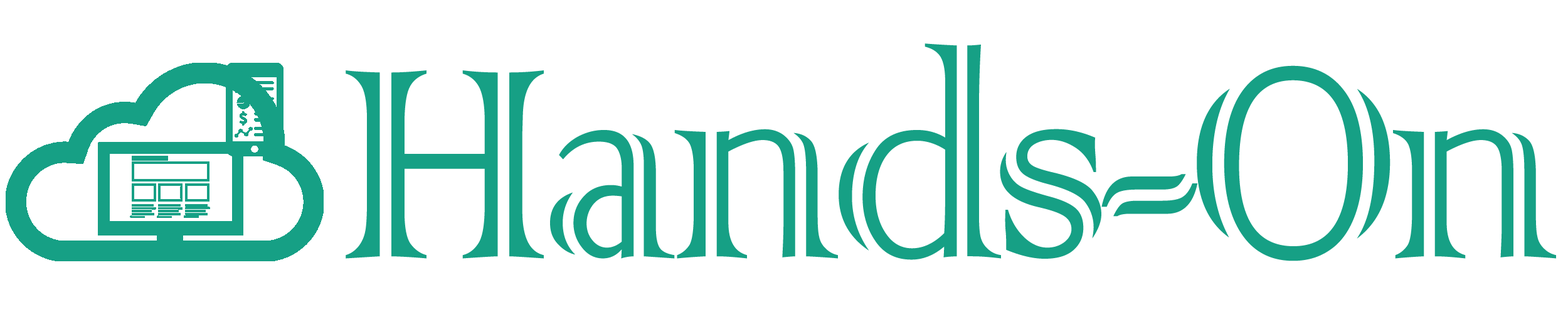
<style>
.page{position:relative;width:1568px;height:314px;background:#ffffff}
.page>*{position:absolute;margin:0}
.t1{font:356.5px "ColonnaMT";letter-spacing:-0.04em;color:#16a085;scale:0.91 1}
</style>
<div class="page">
<p class="t1" style="left:346px;top:43px;width:1210px;height:218px">Hands-On</p>
</div>
